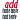
<style>
.page{position:relative;width:20px;height:20px;background:#ffffff}
.page>*{position:absolute;margin:0}
.t1{font:11.2px "MyriadPro-CondIt";color:#cd062b}
.t2{font:6.5px "MyriadPro-CondIt";color:#4d5157;scale:0.77 1}
</style>
<div class="page">
<p class="t1" style="left:5px;top:0px;width:14px;height:8px">add</p>
<p class="t2" style="left:2px;top:8px;width:17px;height:11px">texte texte<br>text texte</p>
</div>
